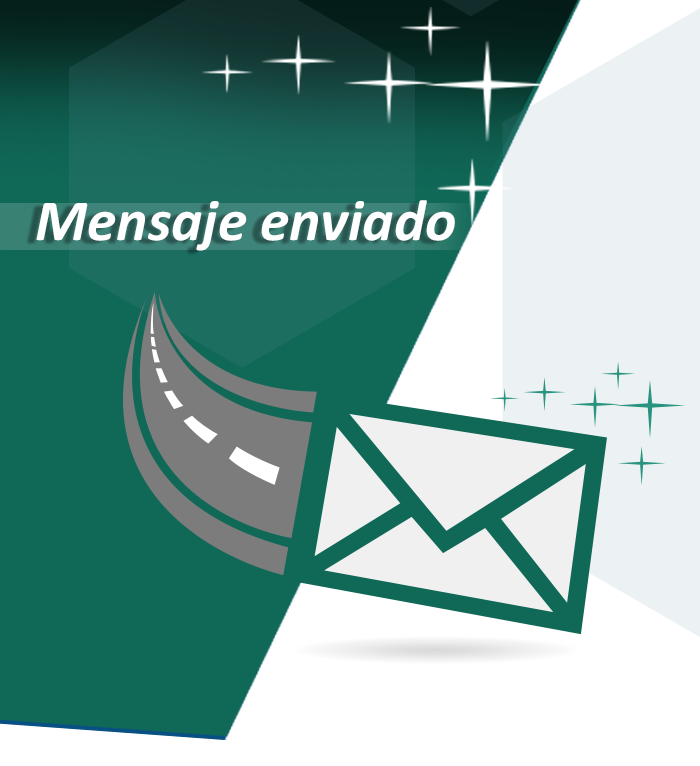
<style>
.page{position:relative;width:700px;height:766px;background:#106857}
.page>*{position:absolute;margin:0}
.t1{font:58.7px "Calibri-BoldItalic";color:#ffffff}
</style>
<div class="page">
<p class="t1" style="left:36px;top:200px;width:419px;height:51px">Mensaje enviado</p>
</div>
